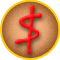
<style>
.page{position:relative;width:60px;height:60px}
.page>*{position:absolute;margin:0}
.t1{font:55px "SegoePrint"}
</style>
<div class="page">
<p class="t1" style="left:14px;top:5px;width:28px;height:49px">$</p>
</div>
